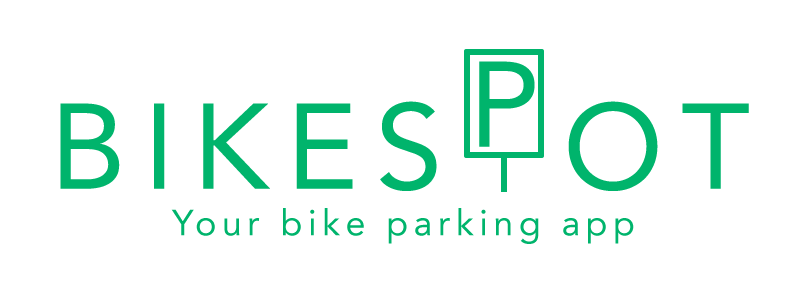
<style>
.page{position:relative;width:792px;height:288px;background:#ffffff}
.page>*{position:absolute;margin:0}
.t1{font:120px "Avenir-Roman";letter-spacing:0.15em;color:#00b46c}
.t2{font:36px "Avenir-Roman";letter-spacing:0.15em;color:#00b46c}
</style>
<div class="page">
<p class="t1" style="left:479px;top:61px;width:56px;height:86px">P</p>
<p class="t1" style="left:60px;top:101px;width:689px;height:90px">BIKES  OT</p>
<p class="t2" style="left:171px;top:208px;width:463px;height:36px">Your bike parking app</p>
</div>
